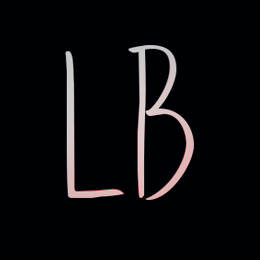
<style>
.page{position:relative;width:260px;height:260px;background:#000104}
.page>*{position:absolute;margin:0}
.t1{font:216.3px "GreenSurf-Regular";color:#dac5c6}
</style>
<div class="page">
<p class="t1" style="left:65px;top:45px;width:129px;height:155px">LB</p>
</div>
